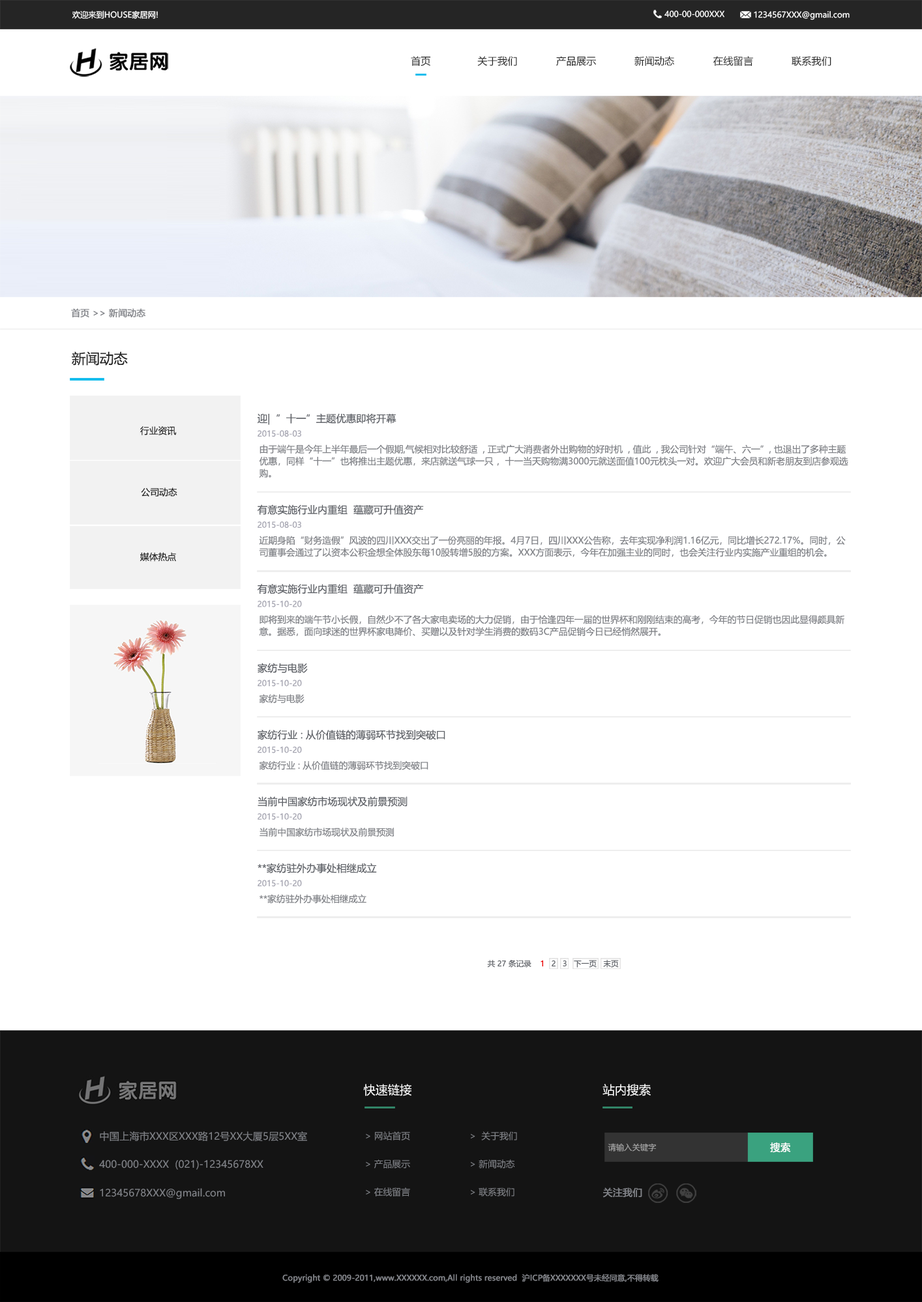
<style>
.page{position:relative;width:922px;height:1302px;background:#ffffff}
.page>*{position:absolute;margin:0}
.t1{font:8px "MicrosoftYaHei";color:#ffffff}
.t2{font:10px "MicrosoftYaHei";color:#252525}
.t3{font:8.9px "MicrosoftYaHei";color:#818388;font-weight:bold}
.t4{font:14px "MicrosoftYaHei";color:#252525}
.t5{font:10px "MicrosoftYaHei";color:#606369}
.t6{font:9px "MicrosoftYaHei";color:#252525}
.t7{font:8px "MicrosoftYaHei";color:#a5a5b1}
.t8{font:9px/12px "MicrosoftYaHei";color:#818388}
.t9{font:9px "MicrosoftYaHei";color:#818388}
.t10{font:7.6px "MicrosoftYaHei";color:#606369}
.t11{font:7.6px "MicrosoftYaHei";color:#ec0000}
.t12{font:12.1px "MicrosoftYaHei";color:#ffffff}
.t13{font:10px "MicrosoftYaHei";color:#818388}
.t14{font:9px/28px "MicrosoftYaHei";color:#818388}
.t15{font:8px "MicrosoftYaHei";color:#adadad}
.t16{font:10px "MicrosoftYaHei";color:#ffffff;font-weight:bold}
.t17{font:9.6px "MicrosoftYaHei";color:#818388;font-weight:bold}
.t18{font:7.6px "MicrosoftYaHei";color:#818388;font-weight:bold}
</style>
<div class="page">
<p class="t1" style="left:72px;top:10px;width:86px;height:9px">欢迎来到HOUSE家居网!</p>
<p class="t1" style="left:664px;top:10px;width:60px;height:8px">400-00-000XXX</p>
<p class="t1" style="left:753px;top:11px;width:96px;height:9px">1234567XXX@gmail.com</p>
<p class="t2" style="left:411px;top:56px;width:20px;height:10px">首页</p>
<p class="t2" style="left:477px;top:56px;width:40px;height:10px">关于我们</p>
<p class="t2" style="left:556px;top:56px;width:40px;height:10px">产品展示</p>
<p class="t2" style="left:634px;top:56px;width:40px;height:10px">新闻动态</p>
<p class="t2" style="left:713px;top:56px;width:40px;height:10px">在线留言</p>
<p class="t2" style="left:791px;top:56px;width:40px;height:10px">联系我们</p>
<p class="t3" style="left:71px;top:308px;width:74px;height:9px">首页 &gt;&gt; 新闻动态</p>
<p class="t4" style="left:72px;top:351px;width:56px;height:15px">新闻动态</p>
<p class="t5" style="left:257px;top:413px;width:139px;height:12px">迎|  ”十一”主题优惠即将开幕</p>
<p class="t6" style="left:140px;top:426px;width:37px;height:9px">行业资讯</p>
<p class="t7" style="left:257px;top:430px;width:44px;height:7px">2015-08-03</p>
<p class="t8" style="left:259px;top:445px;width:589px;height:33px">由于端午是今年上半年最后一个假期,气候相对比较舒适  , 正式广大消费者外出购物的好时机  , 值此  , 我公司针对“端午、六一”, 也退出了多种主题<br>优惠，同样“十一”也将推出主题优惠，来店就送气球一只 ，十一当天购物满3000元就送面值100元枕头一对。欢迎广大会员和新老朋友到店参观选<br>购。</p>
<p class="t6" style="left:141px;top:488px;width:36px;height:9px">公司动态</p>
<p class="t5" style="left:257px;top:504px;width:167px;height:11px">有意实施行业内重组  蕴藏可升值资产</p>
<p class="t7" style="left:257px;top:521px;width:44px;height:7px">2015-08-03</p>
<p class="t8" style="left:259px;top:536px;width:586px;height:21px">近期身陷“财务造假”风波的四川XXX交出了一份亮丽的年报。4月7日，四川XXX公告称，去年实现净利润1.16亿元，同比增长272.17%。同时，公<br>司董事会通过了以资本公积金想全体股东每10股转增5股的方案。XXX方面表示，今年在加强主业的同时，也会关注行业内实施产业重组的机会。</p>
<p class="t6" style="left:139px;top:552px;width:37px;height:10px">媒体热点</p>
<p class="t5" style="left:257px;top:584px;width:167px;height:10px">有意实施行业内重组  蕴藏可升值资产</p>
<p class="t7" style="left:257px;top:600px;width:45px;height:7px">2015-10-20</p>
<p class="t8" style="left:259px;top:615px;width:585px;height:22px">即将到来的端午节小长假，自然少不了各大家电卖场的大力促销，由于恰逢四年一届的世界杯和刚刚结束的高考，今年的节日促销也因此显得颇具新<br>意。据悉，面向球迷的世界杯家电降价、买赠以及针对学生消费的数码3C产品促销今日已经悄然展开。</p>
<p class="t5" style="left:257px;top:663px;width:51px;height:10px">家纺与电影</p>
<p class="t7" style="left:257px;top:680px;width:45px;height:7px">2015-10-20</p>
<p class="t9" style="left:259px;top:694px;width:45px;height:9px">家纺与电影</p>
<p class="t5" style="left:257px;top:730px;width:188px;height:10px">家纺行业 : 从价值链的薄弱环节找到突破口</p>
<p class="t7" style="left:257px;top:746px;width:45px;height:7px">2015-10-20</p>
<p class="t9" style="left:259px;top:761px;width:169px;height:9px">家纺行业 : 从价值链的薄弱环节找到突破口</p>
<p class="t5" style="left:257px;top:796px;width:150px;height:11px">当前中国家纺市场现状及前景预测</p>
<p class="t7" style="left:257px;top:813px;width:45px;height:7px">2015-10-20</p>
<p class="t9" style="left:259px;top:828px;width:135px;height:9px">当前中国家纺市场现状及前景预测</p>
<p class="t5" style="left:257px;top:863px;width:120px;height:10px">**家纺驻外办事处相继成立</p>
<p class="t7" style="left:257px;top:880px;width:45px;height:7px">2015-10-20</p>
<p class="t9" style="left:259px;top:894px;width:107px;height:10px">**家纺驻外办事处相继成立</p>
<p class="t10" style="left:487px;top:960px;width:132px;height:8px">共 27 条记录    <span class="t11">1</span>   2   3   下一页   末页</p>
<p class="t12" style="left:363px;top:1084px;width:48px;height:12px">快速链接</p>
<p class="t12" style="left:602px;top:1084px;width:48px;height:12px">站内搜索</p>
<p class="t13" style="left:100px;top:1131px;width:207px;height:10px">中国上海市XXX区XXX路12号XX大厦5层5XX室</p>
<p class="t14" style="left:366px;top:1131px;width:44px;height:66px">&gt; 网站首页<br>&gt; 产品展示<br>&gt; 在线留言</p>
<p class="t14" style="left:471px;top:1131px;width:46px;height:66px">&gt;  关于我们<br>&gt; 新闻动态<br>&gt; 联系我们</p>
<p class="t15" style="left:607px;top:1143px;width:49px;height:9px">请输入关键字</p>
<p class="t16" style="left:770px;top:1143px;width:21px;height:10px">搜索</p>
<p class="t13" style="left:99px;top:1160px;width:164px;height:10px">400-000-XXXX  (021)-12345678XX</p>
<p class="t13" style="left:100px;top:1188px;width:125px;height:11px">12345678XXX@gmail.com</p>
<p class="t17" style="left:603px;top:1188px;width:39px;height:10px">关注我们</p>
<p class="t18" style="left:282px;top:1274px;width:376px;height:9px">Copyright © 2009-2011,www.XXXXXX.com,All rights reserved  沪ICP备XXXXXXX号未经同意,不得转载</p>
</div>
